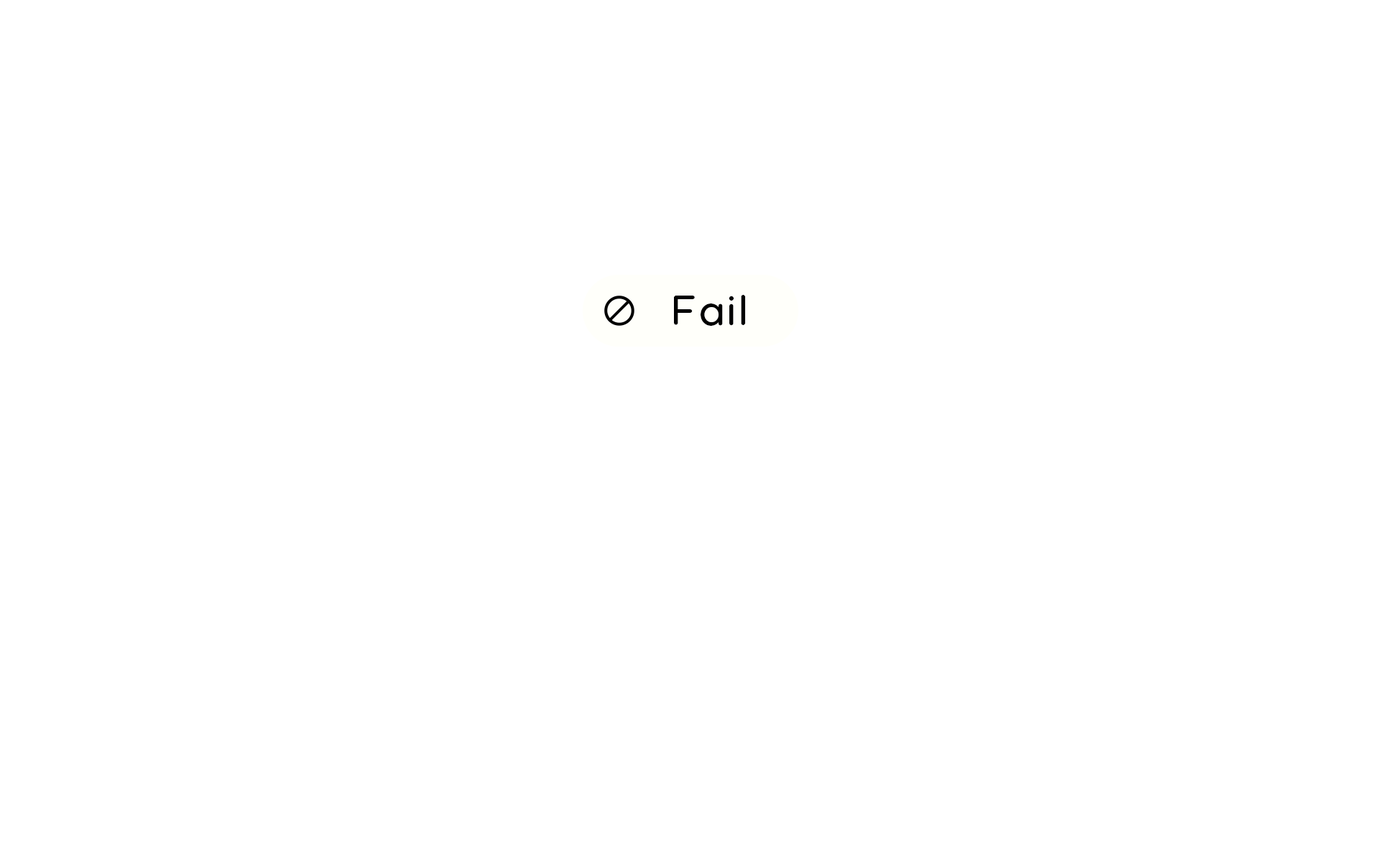
<style>
.page{position:relative;width:1381px;height:863px;background:#ffffff}
.page>*{position:absolute;margin:0}
.t1{font:43.2px "PollyRounded-Regular";color:#000000}
</style>
<div class="page">
<p class="t1" style="left:674px;top:295px;width:71px;height:31px">Fail</p>
</div>
